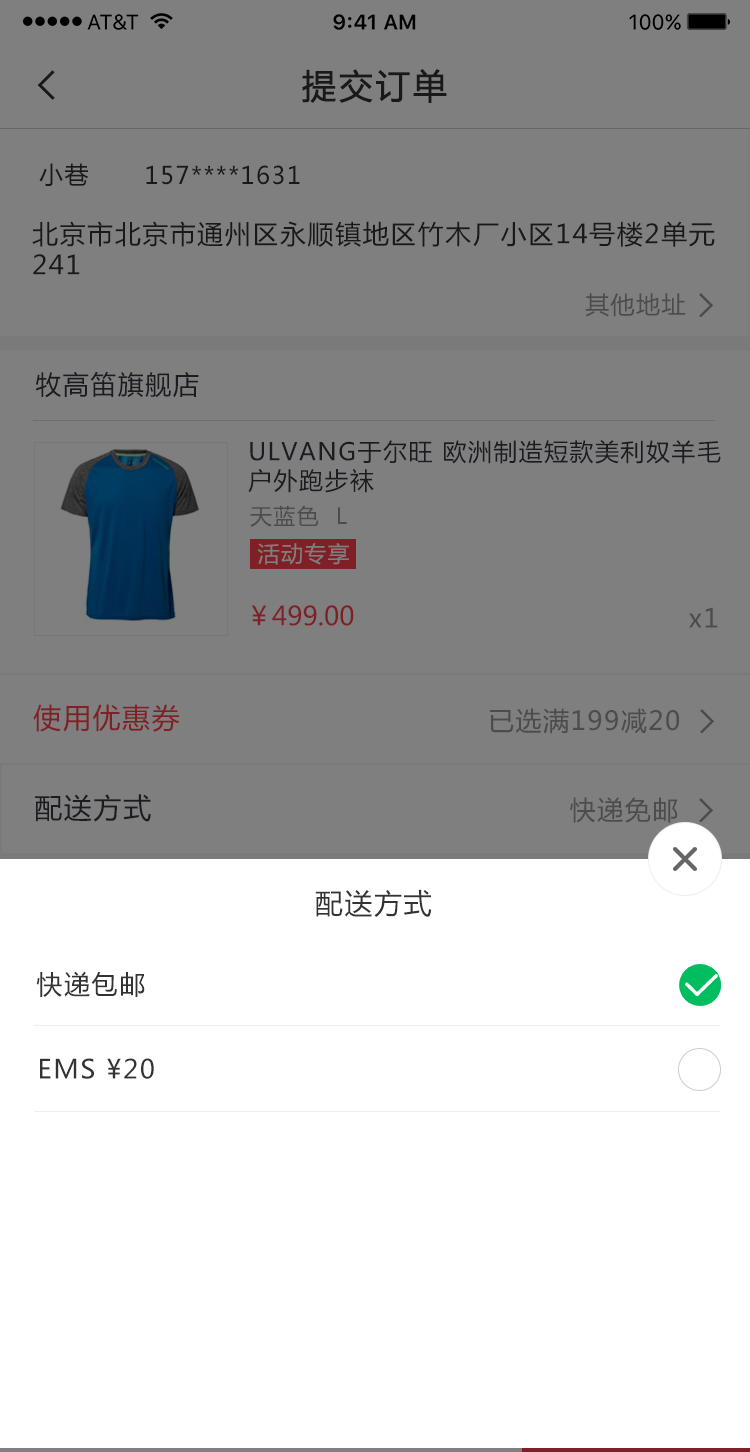
<style>
.page{position:relative;width:750px;height:1452px;background:#7f7f7f}
.page>*{position:absolute;margin:0}
.t1{font:34px "MicrosoftYaHei";letter-spacing:0.06em;color:#191919;font-weight:bold}
.t2{font:24px "MicrosoftYaHei";letter-spacing:0.06em;color:#191919}
.t3{font:26px "MicrosoftYaHei";letter-spacing:0.06em;color:#191919}
.t4{font:24px "MicrosoftYaHei";letter-spacing:0.06em;color:#4c4c4c}
.t5{font:26px "MicrosoftYaHei";letter-spacing:0.06em;color:#1a1c21}
.t6{font:24px "MicrosoftYaHei";letter-spacing:0.06em;color:#1a1c21}
.t7{font:22px "MicrosoftYaHei";letter-spacing:0.06em;color:#4c4c4c}
.t8{font:22px "MicrosoftYaHei";letter-spacing:0.06em;color:#7f7f7f}
.t9{font:26px "MicrosoftYaHei";color:#7f2026}
.t10{font:26px "MicrosoftYaHei";letter-spacing:0.06em;color:#4c4c4c}
.t11{font:28px "MicrosoftYaHei";letter-spacing:0.06em;color:#7f2026}
.t12{font:28px "MicrosoftYaHei";letter-spacing:0.06em;color:#1a1c21}
.t13{font:28px "MicrosoftYaHei";letter-spacing:0.06em;color:#333333}
.t14{font:26px "MicrosoftYaHei";letter-spacing:0.06em;color:#333333}
</style>
<div class="page">
<p class="t1" style="left:302px;top:69px;width:145px;height:34px">提交订单</p>
<p class="t2" style="left:39px;top:163px;width:50px;height:23px">小巷</p>
<p class="t2" style="left:146px;top:165px;width:154px;height:20px">157****1631</p>
<p class="t3" style="left:32px;top:221px;width:683px;height:54px">北京市北京市通州区永顺镇地区竹木厂小区14号楼2单元<br>241</p>
<p class="t4" style="left:585px;top:293px;width:101px;height:24px">其他地址</p>
<p class="t5" style="left:36px;top:371px;width:163px;height:27px">牧高笛旗舰店</p>
<p class="t6" style="left:248px;top:440px;width:473px;height:53px">ULVANG于尔旺 欧洲制造短款美利奴羊毛户外跑步袜</p>
<p class="t7" style="left:250px;top:505px;width:97px;height:22px">天蓝色  L</p>
<p class="t8" style="left:257px;top:543px;width:92px;height:22px">活动专享</p>
<p class="t9" style="left:251px;top:605px;width:103px;height:21px">￥499.00</p>
<p class="t10" style="left:689px;top:607px;width:29px;height:21px">x1</p>
<p class="t11" style="left:33px;top:704px;width:147px;height:28px">使用优惠券</p>
<p class="t10" style="left:490px;top:708px;width:190px;height:26px">已选满199减20</p>
<p class="t12" style="left:35px;top:794px;width:116px;height:28px">配送方式</p>
<p class="t10" style="left:570px;top:797px;width:108px;height:26px">快递免邮</p>
<p class="t13" style="left:315px;top:889px;width:117px;height:28px">配送方式</p>
<p class="t14" style="left:36px;top:971px;width:109px;height:26px">快递包邮</p>
<p class="t14" style="left:40px;top:1058px;width:114px;height:21px">EMS ¥20</p>
</div>
